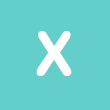
<style>
.page{position:relative;width:110px;height:110px;background:#63ceca}
.page>*{position:absolute;margin:0}
.t1{font:60px "ArialRoundedMTBold";color:#ffffff;font-weight:bold}
</style>
<div class="page">
<p class="t1" style="left:36px;top:31px;width:36px;height:45px">X</p>
</div>
